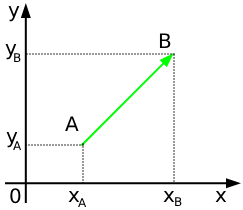
<style>
.page{position:relative;width:243px;height:210px;background:#ffffff}
.page>*{position:absolute;margin:0}
.t1{font:20px "DejaVuSans";color:#000000}
.t2{font:12px "DejaVuSans";color:#000000}
</style>
<div class="page">
<p class="t1" style="left:8px;top:6px;width:12px;height:16px">y</p>
<p class="t1" style="left:159px;top:33px;width:12px;height:15px">B</p>
<p class="t1" style="left:5px;top:44px;width:12px;height:16px">y</p>
<p class="t2" style="left:14px;top:53px;width:7px;height:9px">B</p>
<p class="t1" style="left:65px;top:116px;width:14px;height:15px">A</p>
<p class="t1" style="left:6px;top:132px;width:12px;height:16px">y</p>
<p class="t2" style="left:13px;top:141px;width:9px;height:9px">A</p>
<p class="t1" style="left:10px;top:188px;width:11px;height:16px">0</p>
<p class="t1" style="left:68px;top:191px;width:12px;height:11px">x</p>
<p class="t2" style="left:78px;top:198px;width:9px;height:9px">A</p>
<p class="t1" style="left:163px;top:191px;width:12px;height:11px">x</p>
<p class="t2" style="left:175px;top:197px;width:7px;height:9px">B</p>
<p class="t1" style="left:215px;top:191px;width:12px;height:11px">x</p>
</div>
